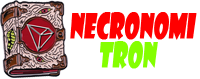
<style>
.page{position:relative;width:200px;height:79px;background:#ffffff}
.page>*{position:absolute;margin:0}
.t1{font:33.1px "ShowcardGothic-Reg";color:#ff0000;font-weight:bold;font-style:italic;scale:0.63 1}
.t2{font:33.1px "ShowcardGothic-Reg";color:#84ff00;font-weight:bold;font-style:italic;scale:0.63 1}
</style>
<div class="page">
<p class="t1" style="left:70px;top:12px;width:127px;height:57px">NECRONOMI    <br>      <span class="t2">tRon</span></p>
</div>
